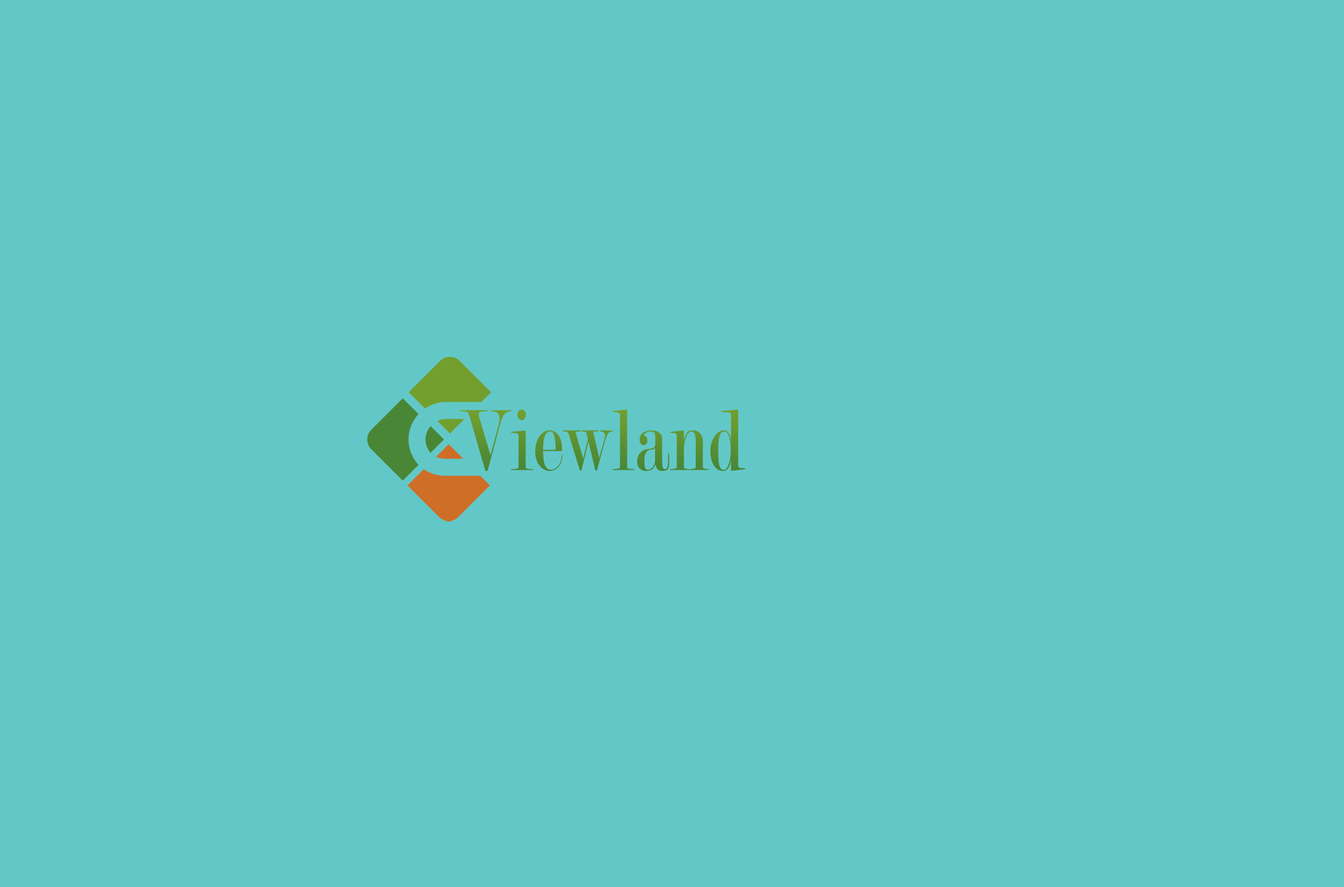
<style>
.page{position:relative;width:1344px;height:887px;background:#62c8c7}
.page>*{position:absolute;margin:0}
.t1{font:92.5px "Modern-Regular";color:#588f33;scale:0.8 1}
</style>
<div class="page">
<p class="t1" style="left:460px;top:409px;width:286px;height:62px">Viewland</p>
</div>
